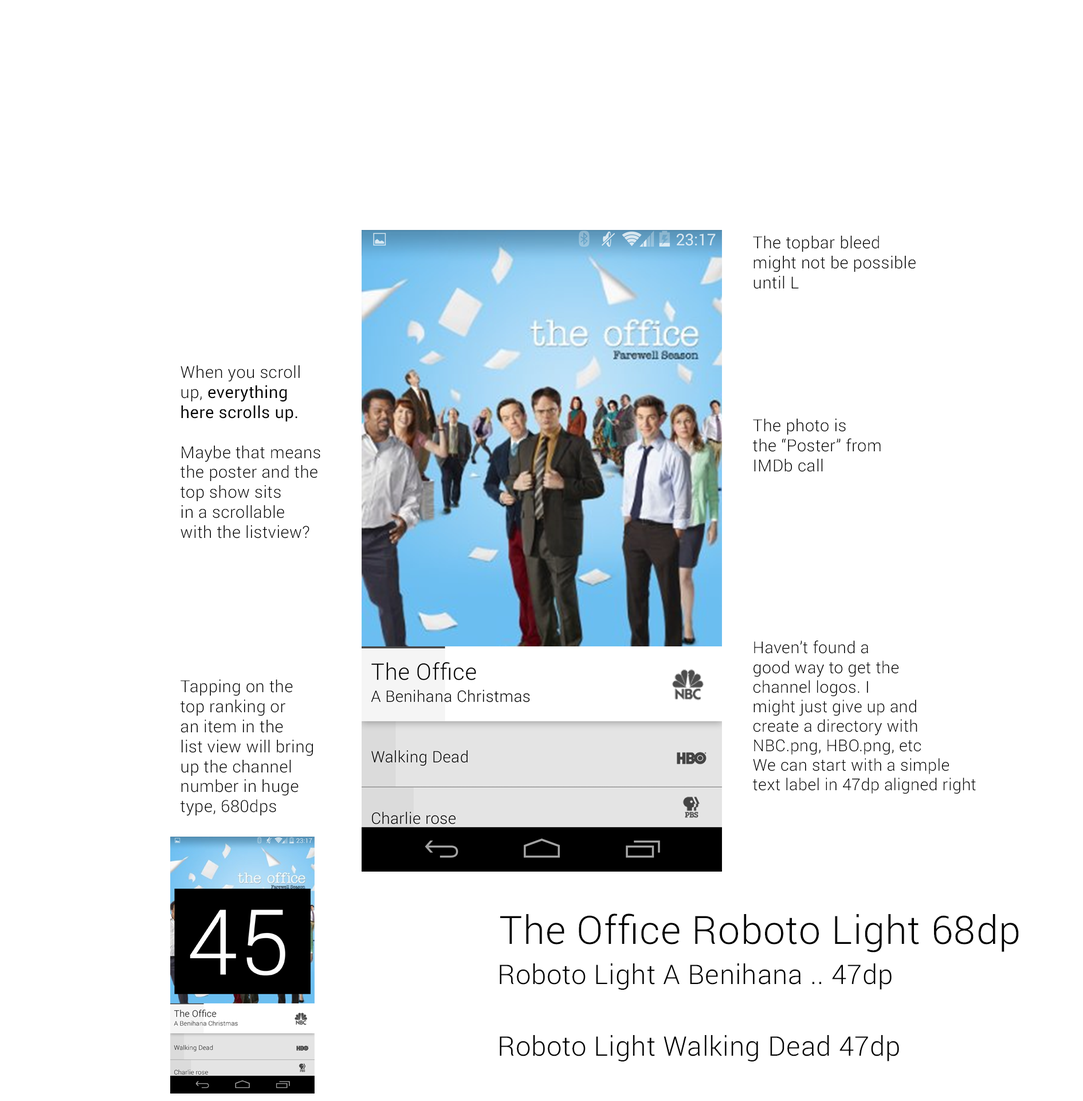
<style>
.page{position:relative;width:1083px;height:1101px;background:#ffffff}
.page>*{position:absolute;margin:0}
.t1{font:16.6px "Roboto-Light";letter-spacing:0.02em;color:#000000}
.t2{font:16.6px "Roboto-Regular";letter-spacing:0.02em;color:#000000}
.t3{font:16.3px "Roboto-Light";letter-spacing:0.02em;color:#000000}
.t4{font:39.1px "Roboto-Light";letter-spacing:0.02em;color:#010101}
.t5{font:27.1px "Roboto-Light";letter-spacing:0.02em;color:#010101}
</style>
<div class="page">
<p class="t1" style="left:753px;top:236px;width:163px;height:53px">The topbar bleed<br>might not be possible<br>until L</p>
<p class="t1" style="left:181px;top:365px;width:139px;height:173px">When you scroll<br>up, <span class="t2">everything <br>here scrolls up. <br></span><br>Maybe that means<br>the poster and the<br>top show sits<br>in a scrollable <br>with the listview?</p>
<p class="t1" style="left:753px;top:418px;width:128px;height:54px">The photo is<br>the “Poster” from<br>IMDb call</p>
<p class="t3" style="left:753px;top:640px;width:223px;height:153px">Haven’t found a <br>good way to get the<br>channel logos. I <br>might just give up and <br>create a directory with<br>NBC.png, HBO.png, etc<br>We can start with a simple<br>text label in 47dp aligned right</p>
<p class="t1" style="left:181px;top:679px;width:132px;height:137px">Tapping on the <br>top ranking or<br>an item in the <br>list view will bring<br>up the channel<br>number in huge<br>type, 680dps</p>
<p class="t4" style="left:500px;top:913px;width:519px;height:39px">The Office Roboto Light 68dp</p>
<p class="t5" style="left:500px;top:963px;width:392px;height:26px">Roboto Light A Benihana .. 47dp</p>
<p class="t5" style="left:500px;top:1035px;width:399px;height:26px">Roboto Light Walking Dead 47dp</p>
</div>
